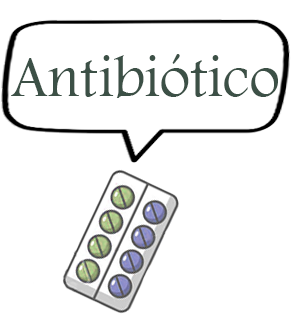
<style>
.page{position:relative;width:291px;height:332px;background:#ffffff}
.page>*{position:absolute;margin:0}
.t1{font:59.8px "FootlightMTLight";color:#3c5046}
</style>
<div class="page">
<p class="t1" style="left:11px;top:54px;width:267px;height:44px">Antibiótico</p>
</div>
